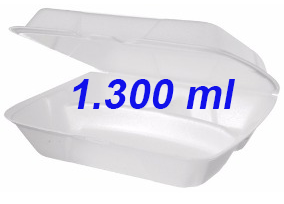
<style>
.page{position:relative;width:284px;height:204px;background:#fefefe}
.page>*{position:absolute;margin:0}
.t1{font:72px "Arial-BoldMT";color:#1111ea;font-style:italic}
</style>
<div class="page">
<p class="t1" style="left:73px;top:79px;width:162px;height:30px">1.300 ml</p>
</div>
